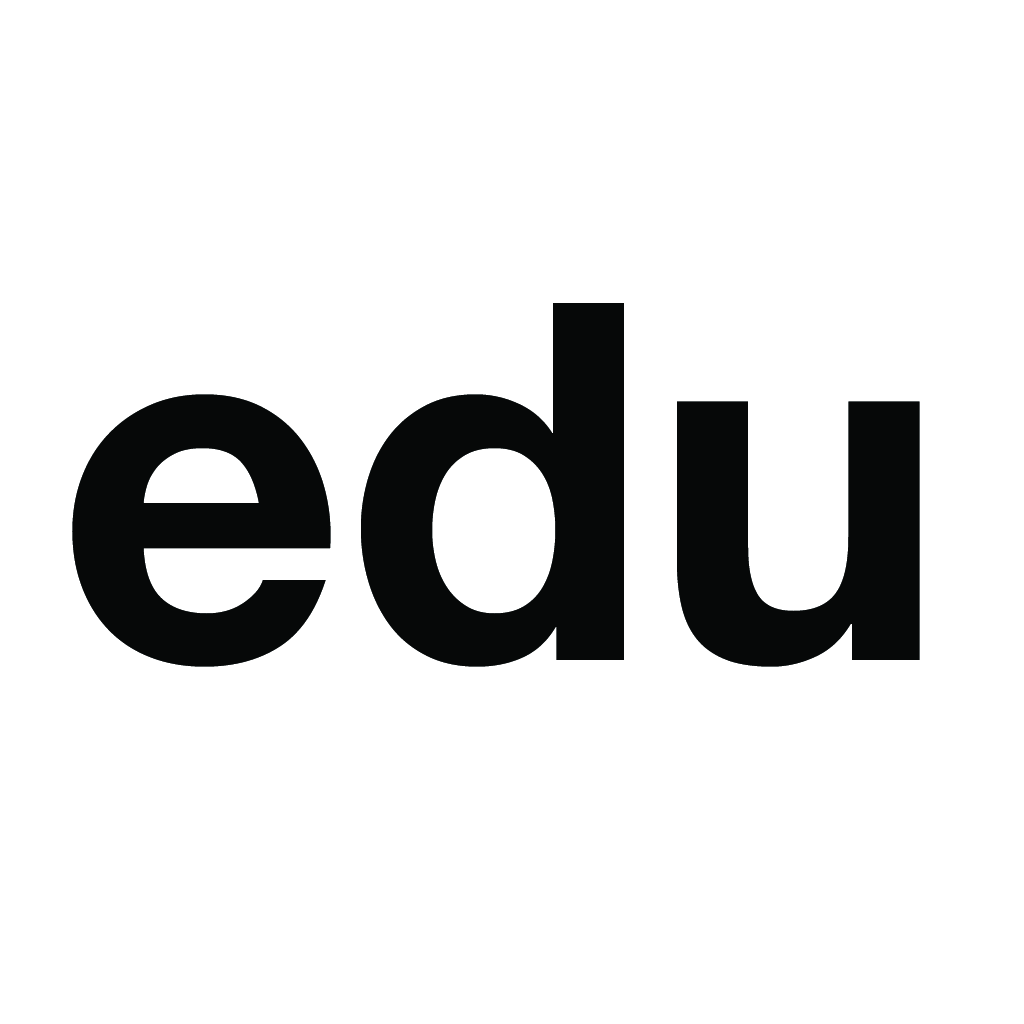
<style>
.page{position:relative;width:1024px;height:1024px;background:#ffffff}
.page>*{position:absolute;margin:0}
.t1{font:500px "HelveticaNeue-Bold";color:#060808}
</style>
<div class="page">
<p class="t1" style="left:72px;top:303px;width:848px;height:364px">edu</p>
</div>
